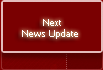
<style>
.page{position:relative;width:103px;height:70px;background:#7a0001}
.page>*{position:absolute;margin:0}
.t1{font:9px "Tahoma";color:#ffffff}
</style>
<div class="page">
<p class="t1" style="left:22px;top:19px;width:56px;height:20px">Next <br>   News Update</p>
</div>
